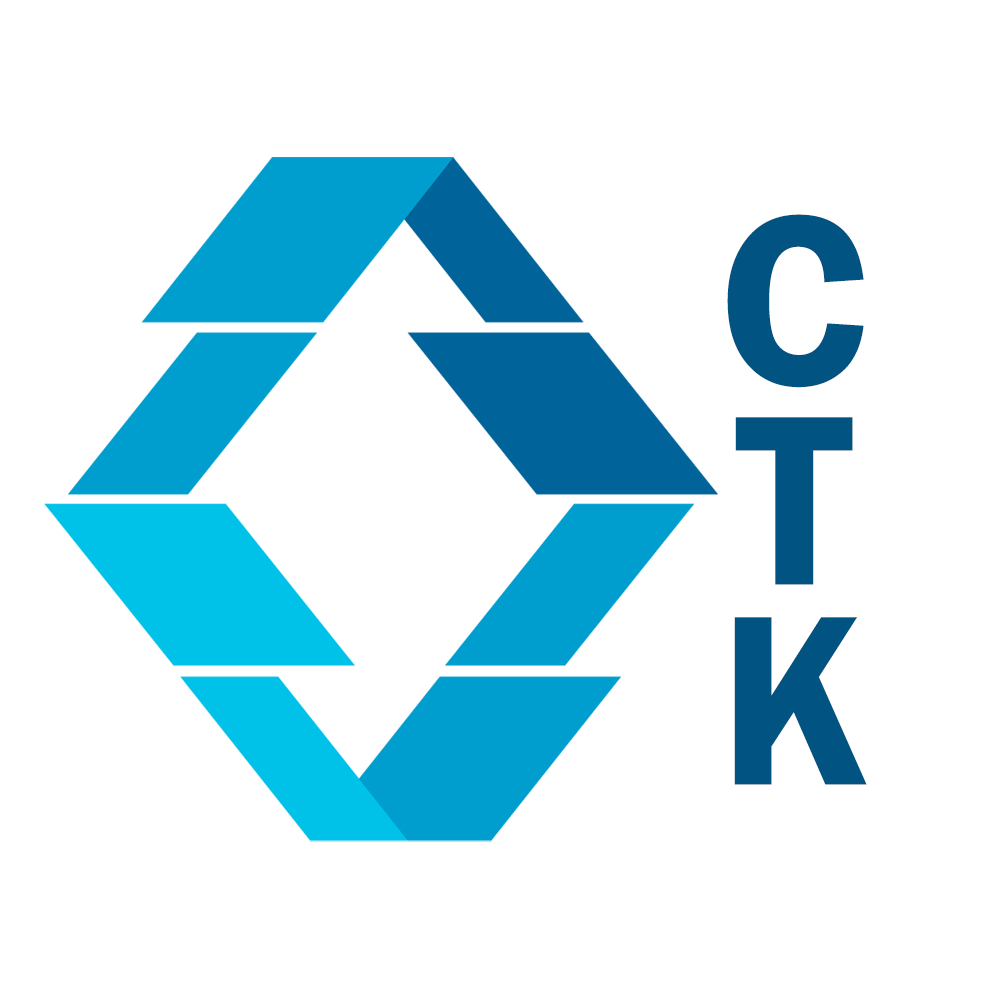
<style>
.page{position:relative;width:1000px;height:1000px;background:#ffffff}
.page>*{position:absolute;margin:0}
.t1{font:250.8px/200px "FranklinGothic-Demi";color:#015381;scale:0.95 1}
</style>
<div class="page">
<p class="t1" style="left:727px;top:214px;width:140px;height:571px;text-align:center">С<br>Т<br>К</p>
</div>
